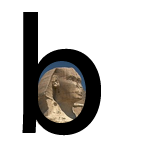
<style>
.page{position:relative;width:144px;height:144px;background:#ffffff}
.page>*{position:absolute;margin:0}
.t1{font:170px "MyriadPro-Regular";color:#000000}
</style>
<div class="page">
<p class="t1" style="left:22px;top:12px;width:79px;height:124px">b</p>
</div>
